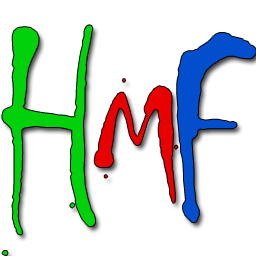
<style>
.page{position:relative;width:256px;height:256px;background:#ffffff}
.page>*{position:absolute;margin:0}
.t1{font:286px "Chiller-Regular";color:#00d10a}
.t2{font:240px "Chiller-Regular";color:#024ecc}
.t3{font:160px "Chiller-Regular";color:#e90101}
</style>
<div class="page">
<p class="t1" style="left:2px;top:25px;width:93px;height:231px">H</p>
<p class="t2" style="left:177px;top:33px;width:79px;height:190px">F</p>
<p class="t3" style="left:94px;top:79px;width:84px;height:124px">M</p>
</div>
